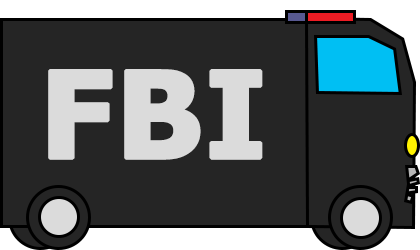
<style>
.page{position:relative;width:420px;height:250px;background:#252525}
.page>*{position:absolute;margin:0}
.t1{font:119.8px "Tahoma-Bold";color:#dbdbdb;font-weight:bold;scale:1.04 1}
</style>
<div class="page">
<p class="t1" style="left:48px;top:69px;width:215px;height:91px">FBI</p>
</div>
